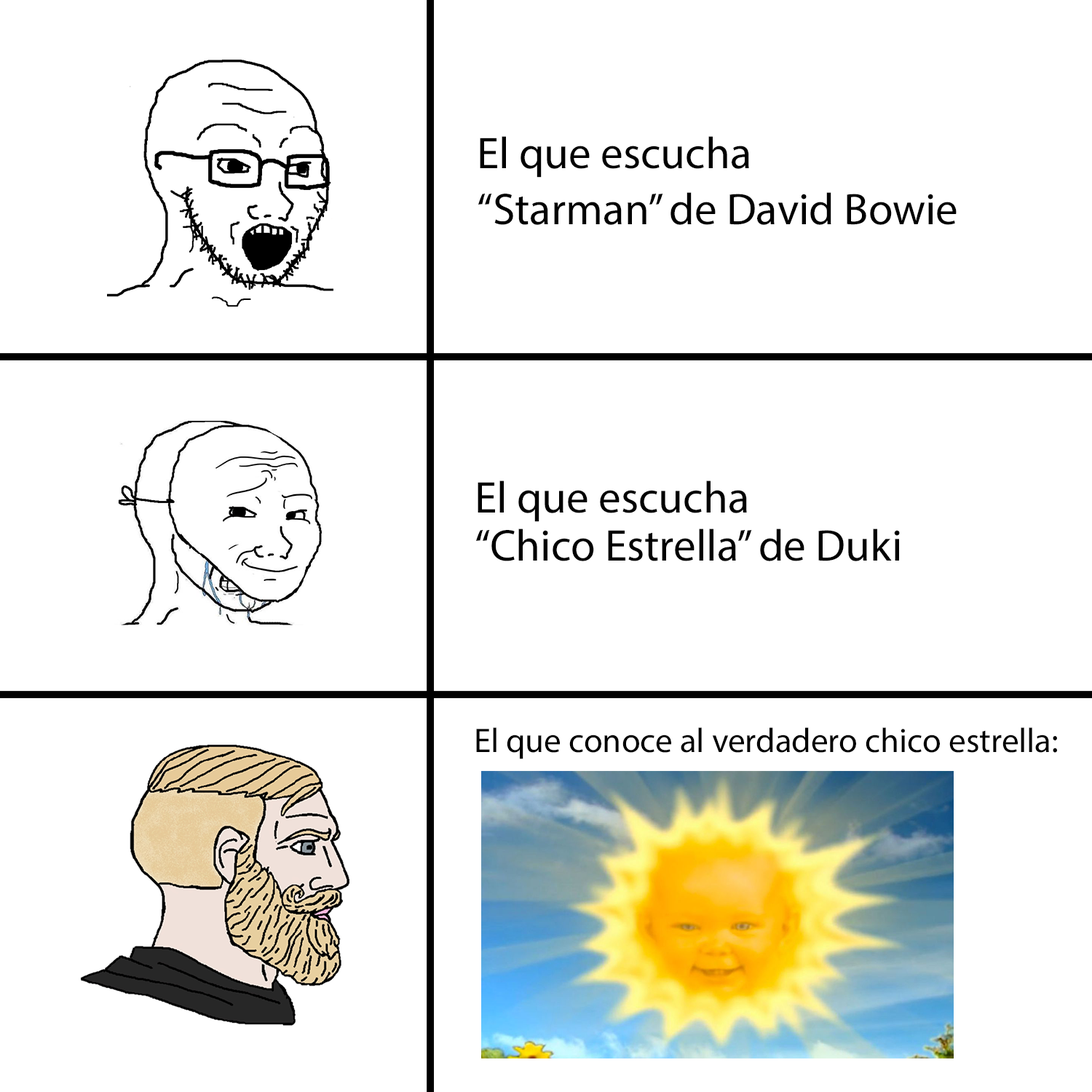
<style>
.page{position:relative;width:1092px;height:1092px;background:#ffffff}
.page>*{position:absolute;margin:0}
.t1{font:44.7px "MyriadPro-Regular";color:#000000}
.t2{font:34.3px "MyriadPro-Regular";color:#000000}
</style>
<div class="page">
<p class="t1" style="left:478px;top:136px;width:479px;height:89px">El que escucha<br>“Starman” de David Bowie</p>
<p class="t1" style="left:476px;top:480px;width:424px;height:81px">El que escucha <br>“Chico Estrella” de Duki</p>
<p class="t2" style="left:476px;top:727px;width:581px;height:32px">El que conoce al verdadero chico estrella:</p>
</div>
